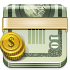
<style>
.page{position:relative;width:70px;height:70px}
.page>*{position:absolute;margin:0}
.t1{font:14px "TimesNewRomanPS-BoldMT";color:#634712}
.t2{font:10px "StencilStd";color:#f3fbe4}
</style>
<div class="page">
<p class="t1" style="left:8px;top:36px;width:7px;height:12px">$</p>
<p class="t2" style="left:50px;top:36px;width:9px;height:13px;rotate:91deg">10</p>
</div>
